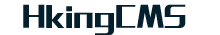
<style>
.page{position:relative;width:220px;height:35px;background:#ffffff}
.page>*{position:absolute;margin:0}
.t1{font:25.3px "MFLiHei_Noncommercial-Regular";color:#04202e}
</style>
<div class="page">
<p class="t1" style="left:23px;top:4px;width:163px;height:31px">HkingCMS</p>
</div>
